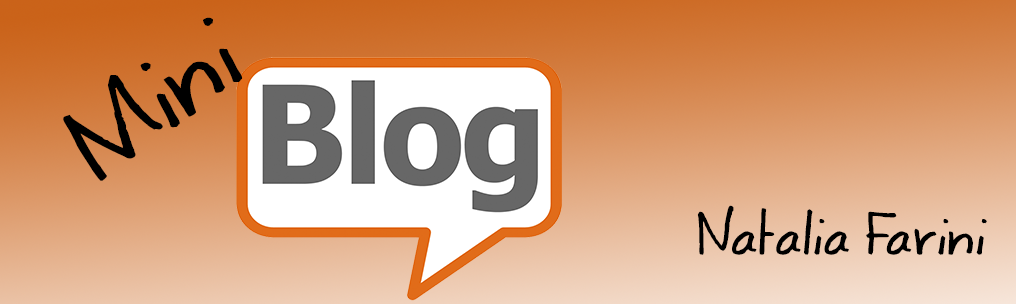
<style>
.page{position:relative;width:1016px;height:304px}
.page>*{position:absolute;margin:0}
.t1{font:91.9px "CoertSchriftRomaans";color:#000000}
.t2{font:45.9px "CoertSchriftRomaans";color:#000000}
</style>
<div class="page">
<p class="t1" style="left:63px;top:17px;width:180px;height:164px;rotate:-36deg">Mini</p>
<p class="t2" style="left:697px;top:205px;width:290px;height:50px">Natalia Farini</p>
</div>
